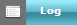
<style>
.page{position:relative;width:77px;height:25px;background:#717373}
.page>*{position:absolute;margin:0}
.t1{font:10.1px "Tahoma-Bold";letter-spacing:0.04em;color:#ffffff;scale:1.1 1}
</style>
<div class="page">
<p class="t1" style="left:40px;top:7px;width:21px;height:9px">Log</p>
</div>
